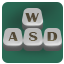
<style>
.page{position:relative;width:64px;height:64px}
.page>*{position:absolute;margin:0}
.t1{font:14.1px "BritannicBold";letter-spacing:0.049em;color:#514634;scale:1.22 1}
</style>
<div class="page">
<p class="t1" style="left:25px;top:13px;width:14px;height:9px">W</p>
<p class="t1" style="left:8px;top:32px;width:10px;height:9px">A</p>
<p class="t1" style="left:29px;top:32px;width:9px;height:9px">S</p>
<p class="t1" style="left:47px;top:32px;width:11px;height:9px">D</p>
</div>
